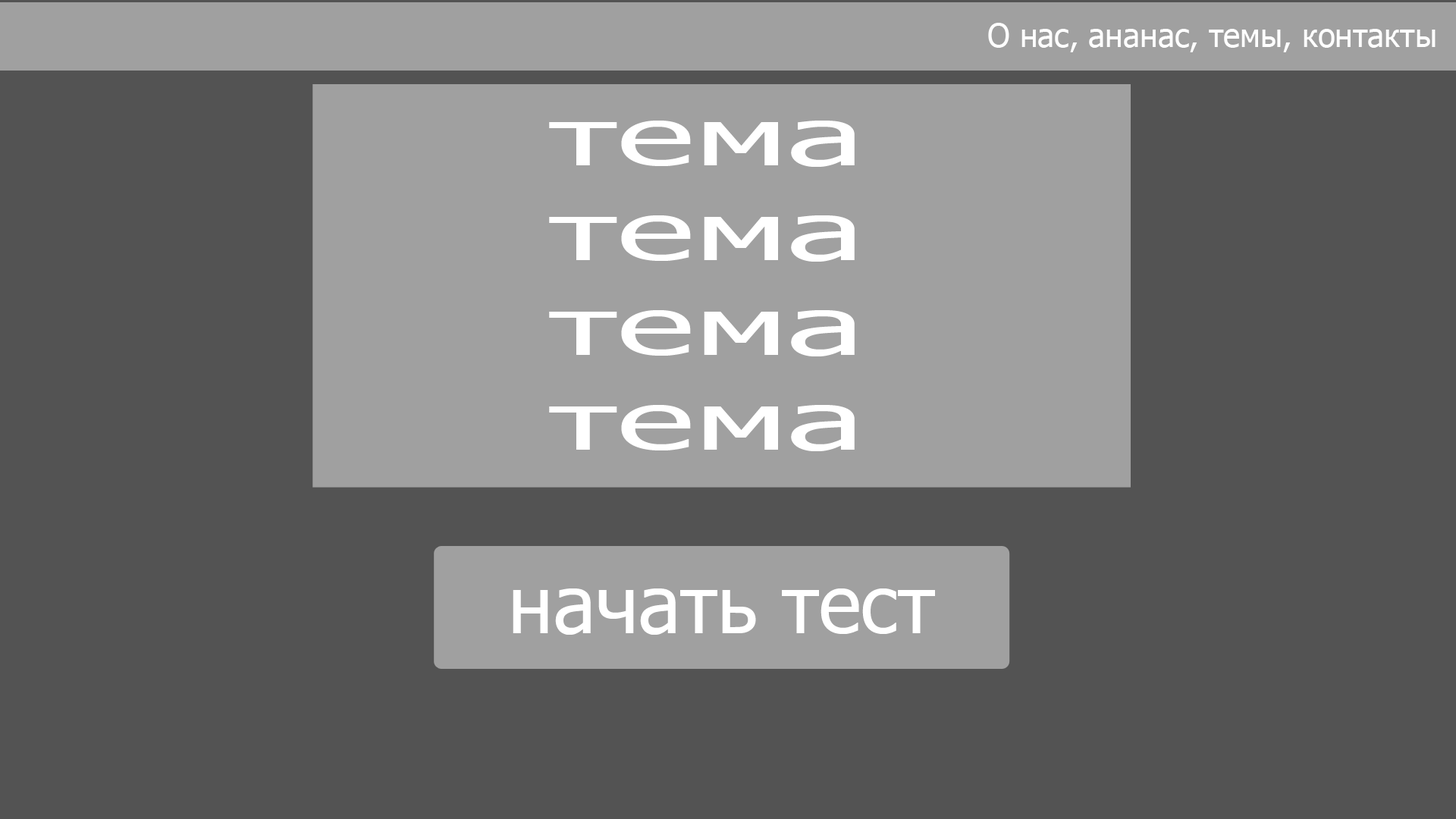
<style>
.page{position:relative;width:1456px;height:819px;background:#535353}
.page>*{position:absolute;margin:0}
.t1{font:31.8px "Tahoma";color:#ffffff}
.t2{font:79px "Tahoma";color:#ffffff;scale:1.85 1}
.t3{font:79.6px "Tahoma";color:#ffffff}
</style>
<div class="page">
<p class="t1" style="left:988px;top:23px;width:448px;height:29px">О нас, ананас, темы, контакты</p>
<p class="t2" style="left:549px;top:121px;width:306px;height:330px">тема<br>тема<br>тема<br>тема</p>
<p class="t3" style="left:513px;top:588px;width:422px;height:47px">начать тест</p>
</div>
